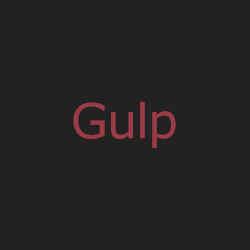
<style>
.page{position:relative;width:250px;height:250px;background:#222222}
.page>*{position:absolute;margin:0}
.t1{font:48px "Verdana";letter-spacing:-0.025em;color:#9c3b48}
</style>
<div class="page">
<p class="t1" style="left:73px;top:101px;width:103px;height:47px">Gulp</p>
</div>
